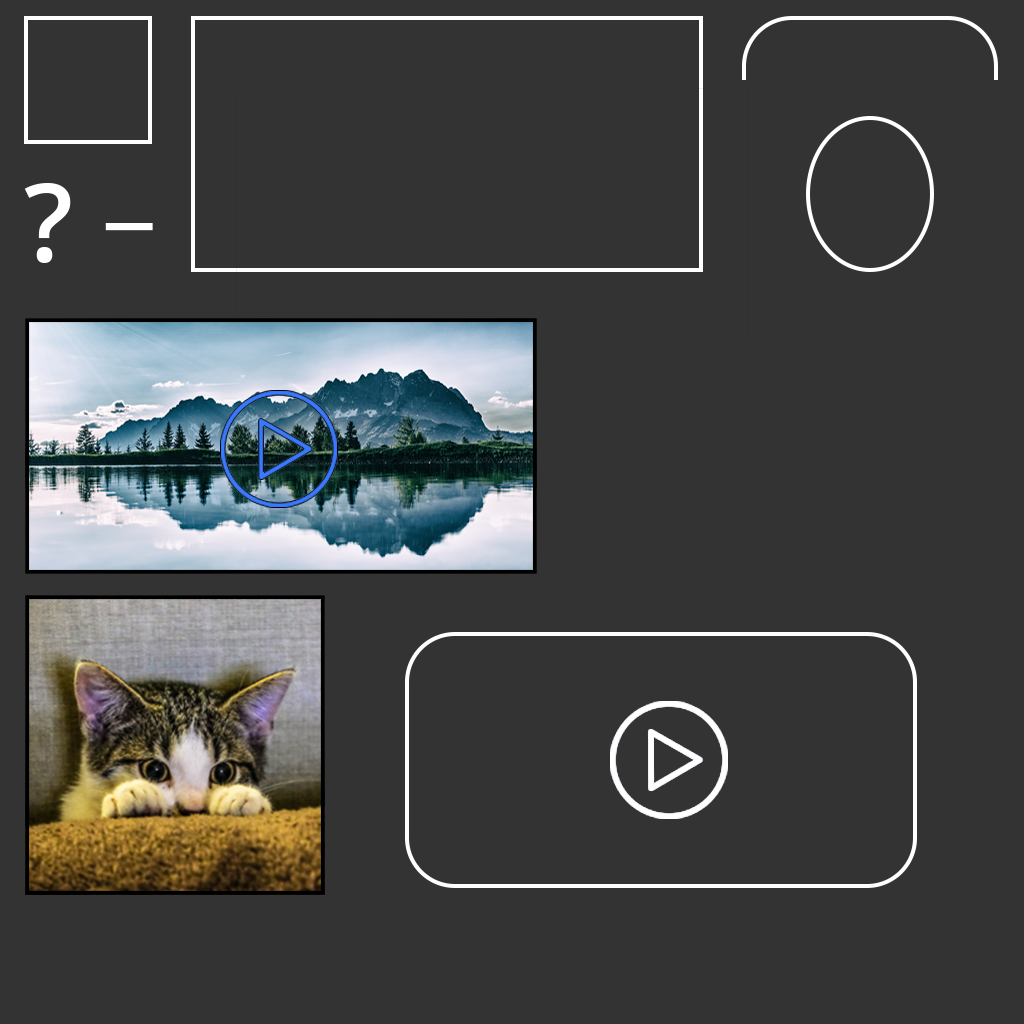
<style>
.page{position:relative;width:1024px;height:1024px;background:#333333}
.page>*{position:absolute;margin:0}
.t1{font:108.3px "OpenSans-Semibold";color:#ffffff}
</style>
<div class="page">
<p class="t1" style="left:24px;top:183px;width:47px;height:80px">?</p>
<p class="t1" style="left:105px;top:223px;width:48px;height:8px">_</p>
</div>
